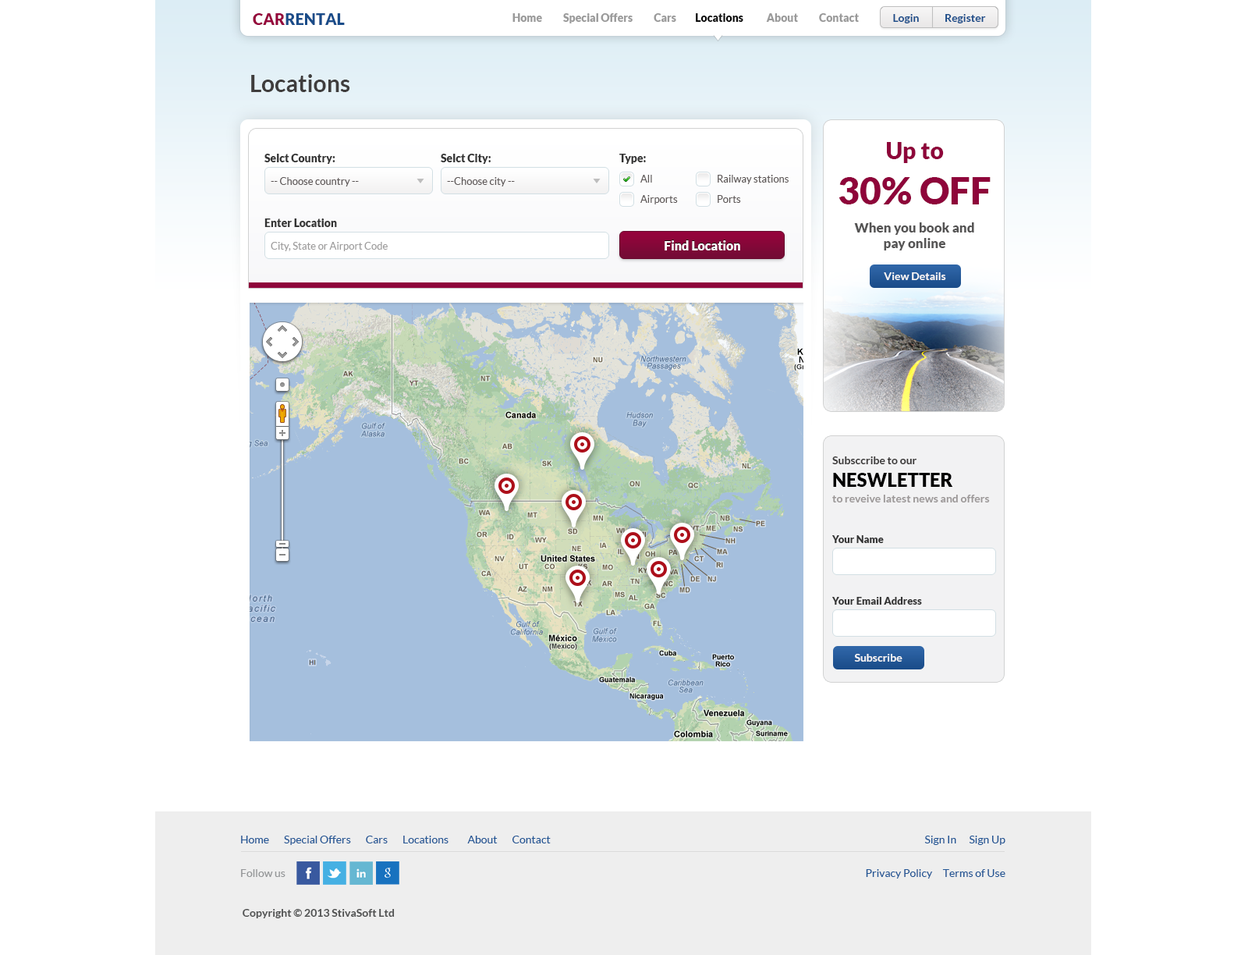
<style>
.page{position:relative;width:1248px;height:955px;background:#ffffff}
.page>*{position:absolute;margin:0}
.t1{font:15.6px "Lato-Black";color:#1a4c89;text-transform:uppercase}
.t2{font:15.6px "Lato-Black";color:#95033b;text-transform:uppercase}
.t3{font:10.9px "Lato-Black";color:#9a9a9a}
.t4{font:10.9px "Lato-Black";color:#0a0a0a}
.t5{font:11px "Lato-Bold";color:#1a4c89}
.t6{font:23.4px "Lato-Bold";color:#3f3d3d}
.t7{font:13.3px/14px "Lato-Black";color:#555454}
.t8{font:23.4px "Lato-Black";color:#8e053a}
.t9{font:37.5px "Lato-Black";color:#8e053a;text-transform:uppercase}
.t10{font:13.3px "Lato-Black";color:#555454}
.t11{font:10.9px "Lato-Black";color:#333333}
.t12{font:10.1px "Lato-Regular";color:#5e5858}
.t13{font:10.1px "Lato-Regular";color:#9e9d9d}
.t14{font:12.5px "Lato-Black";color:#ffffff}
.t15{font:10.9px "Lato-Bold";color:#f7f6f6}
.t16{font:10.9px/15.6px "Lato-Bold";color:#9c9898}
.t17{font:10.9px "Lato-Bold";color:#393737}
.t18{font:18.7px "Lato-Black";color:#000000;text-transform:uppercase}
.t19{font:10.1px "Lato-Black";color:#333333}
.t20{font:10.9px "Lato-Regular";color:#225695}
.t21{font:10.9px "Lato-Regular";color:#949698}
.t22{font:10.9px "Lato-Bold";color:#4f5050}
</style>
<div class="page">
<p class="t1" style="left:253px;top:13px;width:92px;height:12px"><span class="t2">car</span>rental</p>
<p class="t3" style="left:513px;top:13px;width:346px;height:10px">Home          Special Offers          Cars         <span class="t4">Locations</span>           About          Contact</p>
<p class="t5" style="left:893px;top:14px;width:93px;height:9px">Login            Register</p>
<p class="t6" style="left:251px;top:74px;width:99px;height:18px">Locations</p>
<p class="t7" style="left:839px;top:142px;width:152px;height:108px;text-align:center"><span class="t8">Up to <br></span><span class="t9">30% off<br><br></span>When you book and <br><span class="t10">pay online</span></p>
<p class="t11" style="left:265px;top:154px;width:71px;height:10px">Selct Country:</p>
<p class="t11" style="left:441px;top:154px;width:50px;height:10px">Selct City:</p>
<p class="t11" style="left:620px;top:154px;width:26px;height:10px">Type:</p>
<p class="t12" style="left:271px;top:177px;width:88px;height:9px">-- Choose country --</p>
<p class="t12" style="left:447px;top:177px;width:68px;height:9px">--Choose city --</p>
<p class="t12" style="left:641px;top:175px;width:11px;height:8px">All</p>
<p class="t12" style="left:718px;top:175px;width:71px;height:9px">Railway stations</p>
<p class="t12" style="left:641px;top:195px;width:37px;height:9px">Airports</p>
<p class="t12" style="left:718px;top:195px;width:23px;height:8px">Ports</p>
<p class="t11" style="left:265px;top:218px;width:72px;height:9px">Enter Location</p>
<p class="t13" style="left:271px;top:242px;width:117px;height:9px">City, State or Airport Code</p>
<p class="t14" style="left:665px;top:240px;width:76px;height:10px">Find Location</p>
<p class="t15" style="left:884px;top:272px;width:63px;height:8px">View Details</p>
<p class="t16" style="left:833px;top:456px;width:157px;height:47px"><span class="t17">Subsccribe to our <br></span><span class="t18">neswletter<br></span>to reveive latest news and offers</p>
<p class="t19" style="left:833px;top:535px;width:51px;height:8px">Your Name</p>
<p class="t19" style="left:833px;top:597px;width:89px;height:8px">Your Email Address</p>
<p class="t15" style="left:854px;top:654px;width:49px;height:8px">Subscribe</p>
<p class="t20" style="left:241px;top:836px;width:310px;height:9px">Home       Special Offers       Cars       Locations         About       Contact</p>
<p class="t20" style="left:925px;top:836px;width:81px;height:9px">Sign In      Sign Up</p>
<p class="t21" style="left:241px;top:869px;width:45px;height:8px">Follow us</p>
<p class="t20" style="left:866px;top:869px;width:140px;height:10px">Privacy Policy     Terms of Use</p>
<p class="t22" style="left:243px;top:909px;width:152px;height:9px">Copyright © 2013 StivaSoft Ltd</p>
</div>
